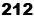
<style>
.page{position:relative;width:34px;height:18px;background:#ffffff}
.page>*{position:absolute;margin:0}
.t1{font:16px "Arial-Black";color:#000000}
</style>
<div class="page">
<p class="t1" style="left:0px;top:3px;width:35px;height:17px">212</p>
</div>
